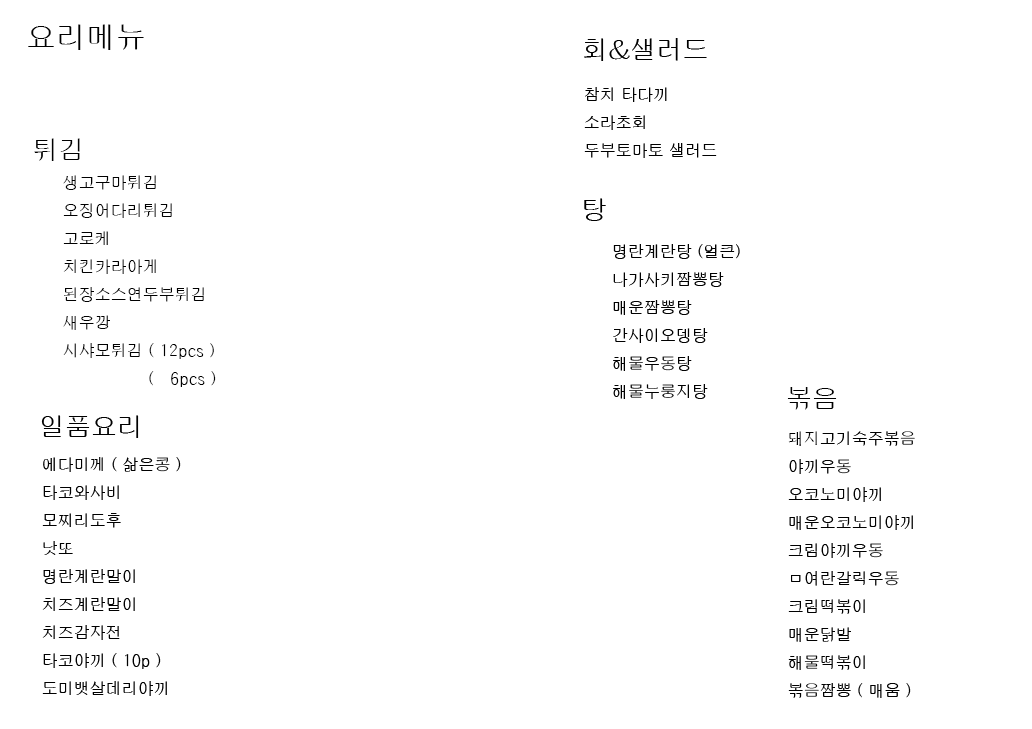
<style>
.page{position:relative;width:1032px;height:729px;background:#ffffff}
.page>*{position:absolute;margin:0}
.t1{font:30px "H2gprM";color:#000000}
.t2{font:26px "H2gprM";color:#000000}
.t3{font:16px "H2gprM";color:#000000}
</style>
<div class="page">
<p class="t1" style="left:28px;top:24px;width:116px;height:26px">요리메뉴</p>
<p class="t2" style="left:584px;top:38px;width:123px;height:23px">회&amp;샐러드</p>
<p class="t3" style="left:584px;top:87px;width:133px;height:71px">참치 타다끼<br>소라초회<br>두부토마토 샐러드</p>
<p class="t2" style="left:34px;top:138px;width:46px;height:23px">튀김</p>
<p class="t3" style="left:63px;top:175px;width:153px;height:212px">생고구마튀김<br>오징어다리튀김<br>고로케<br>치킨카라아게<br>된장소스연두부튀김<br>새우깡<br>시샤모튀김 ( 12pcs )<br>                (   6pcs )</p>
<p class="t2" style="left:584px;top:198px;width:22px;height:23px">탕</p>
<p class="t3" style="left:613px;top:244px;width:127px;height:155px">명란계란탕 (얼큰)<br>나가사키짬뽕탕<br>매운짬뽕탕<br>간사이오뎅탕<br>해물우동탕<br>해물누룽지탕</p>
<p class="t2" style="left:787px;top:387px;width:50px;height:23px">볶음</p>
<p class="t2" style="left:41px;top:415px;width:98px;height:23px">일품요리</p>
<p class="t3" style="left:788px;top:431px;width:127px;height:267px">돼지고기숙주볶음<br>야끼우동<br>오코노미야끼<br>매운오코노미야끼<br>크림야끼우동<br>ㅁ여란갈릭우동<br>크림떡볶이<br>매운닭발<br>해물떡볶이<br>볶음짬뽕 ( 매움 )</p>
<p class="t3" style="left:42px;top:457px;width:139px;height:239px">에다미께 ( 삶은콩 )<br>타코와사비<br>모찌리도후<br>낫또<br>명란계란말이<br>치즈계란말이<br>치즈감자전<br>타코야끼 ( 10p )<br>도미뱃살데리야끼</p>
</div>
